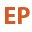
<style>
.page{position:relative;width:32px;height:32px;background:#ffffff}
.page>*{position:absolute;margin:0}
.t1{font:24px "MyriadPro-Bold";color:#d55a23}
</style>
<div class="page">
<p class="t1" style="left:5px;top:7px;width:25px;height:17px">EP</p>
</div>
